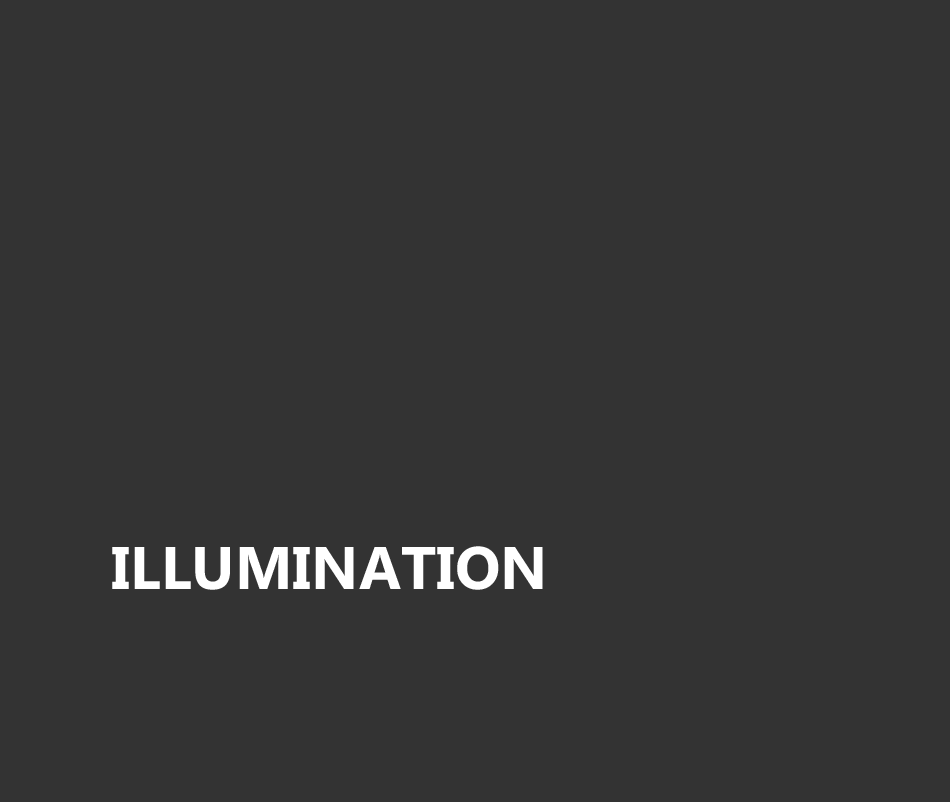
<style>
.page{position:relative;width:950px;height:802px;background:#333333}
.page>*{position:absolute;margin:0}
.t1{font:60px "MicrosoftPhagsPa-Bold";color:#ffffff}
.t2{font:107px "MicrosoftPhagsPa-Bold";color:#ffffff;text-decoration:underline}
</style>
<div class="page">
<p class="t1" style="left:112px;top:546px;width:431px;height:44px"><span class="t2"><br><br></span>ILLUMINATION</p>
</div>
